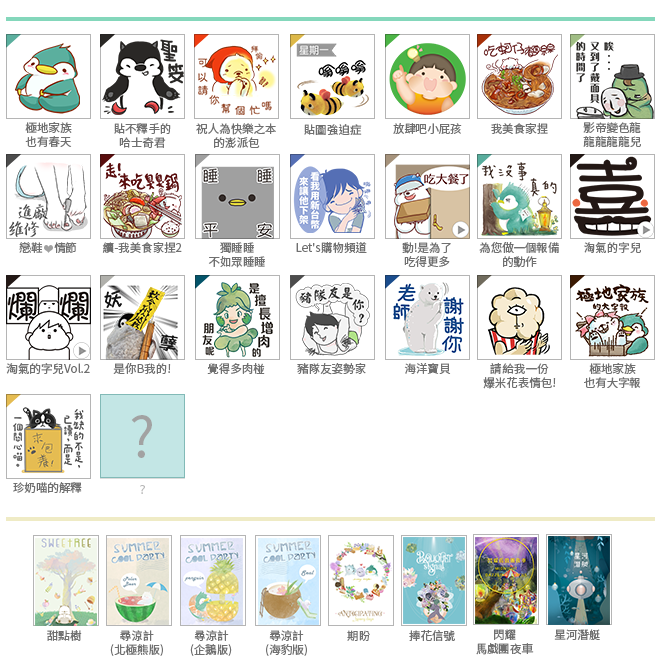
<style>
.page{position:relative;width:660px;height:660px;background:#ffffff}
.page>*{position:absolute;margin:0}
.t1{font:11.5px/14px "SourceHanSansTW-Regular";color:#707070}
.t2{font:11.5px "SourceHanSansTW-Regular";color:#707070}
.t3{font:11.5px "DFKaiShu-SB-Estd-BF";color:#707070}
.t4{font:54.8px "SourceHanSansTW-Regular";letter-spacing:0.05em;color:#a2a2a2}
.t5{font:11.5px "SourceHanSansTW-Regular";color:#b9b9b9}
</style>
<div class="page">
<p class="t1" style="left:25px;top:122px;width:47px;height:25px;text-align:center">極地家族<br>也有春天</p>
<p class="t1" style="left:114px;top:123px;width:57px;height:25px;text-align:center">貼不釋手的<br>哈士奇君</p>
<p class="t1" style="left:196px;top:123px;width:80px;height:25px;text-align:center">祝人為快樂之本<br>的澎派包</p>
<p class="t2" style="left:304px;top:124px;width:58px;height:11px">貼圖強迫症</p>
<p class="t2" style="left:393px;top:123px;width:69px;height:11px">放肆吧小屁孩</p>
<p class="t2" style="left:491px;top:123px;width:57px;height:11px">我美食家捏</p>
<p class="t1" style="left:583px;top:122px;width:58px;height:25px;text-align:center">影帝變色龍<br>龍龍龍龍兒</p>
<p class="t2" style="left:19px;top:242px;width:58px;height:11px">戀鞋<span class="t3">❤</span>情節</p>
<p class="t2" style="left:102px;top:242px;width:80px;height:11px">續-我美食家捏2</p>
<p class="t1" style="left:208px;top:242px;width:57px;height:26px;text-align:center">獨睡睡<br>不如眾睡睡</p>
<p class="t2" style="left:296px;top:242px;width:71px;height:11px">Let's購物頻道</p>
<p class="t1" style="left:402px;top:242px;width:49px;height:25px;text-align:center">動!是為了<br>吃得更多</p>
<p class="t1" style="left:479px;top:242px;width:80px;height:26px;text-align:center">為您做一個報備<br>的動作</p>
<p class="t2" style="left:584px;top:242px;width:57px;height:11px">淘氣的字兒</p>
<p class="t2" style="left:6px;top:363px;width:84px;height:11px">淘氣的字兒Vol.2</p>
<p class="t2" style="left:113px;top:363px;width:58px;height:11px">是你B我的!</p>
<p class="t2" style="left:207px;top:363px;width:58px;height:11px">覺得多肉椪</p>
<p class="t2" style="left:297px;top:363px;width:69px;height:12px">豬隊友姿勢家</p>
<p class="t2" style="left:404px;top:363px;width:47px;height:11px">海洋寶貝</p>
<p class="t1" style="left:483px;top:363px;width:73px;height:26px;text-align:center">請給我一份<br>爆米花表情包!</p>
<p class="t1" style="left:584px;top:363px;width:57px;height:25px;text-align:center">極地家族<br>也有大字報</p>
<p class="t4" style="left:131px;top:415px;width:21px;height:43px">?</p>
<p class="t2" style="left:13px;top:482px;width:69px;height:11px">珍奶喵的解釋</p>
<p class="t5" style="left:140px;top:485px;width:5px;height:9px">?</p>
<p class="t2" style="left:47px;top:630px;width:35px;height:11px">甜點樹</p>
<p class="t1" style="left:110px;top:630px;width:53px;height:26px;text-align:center">尋涼計<br>(北極熊版)</p>
<p class="t1" style="left:190px;top:630px;width:42px;height:26px;text-align:center">尋涼計<br>(企鵝版)</p>
<p class="t1" style="left:266px;top:630px;width:41px;height:26px;text-align:center">尋涼計<br>(海豹版)</p>
<p class="t2" style="left:347px;top:630px;width:23px;height:11px">期盼</p>
<p class="t2" style="left:409px;top:630px;width:46px;height:11px">捧花信號</p>
<p class="t1" style="left:476px;top:629px;width:58px;height:26px;text-align:center">閃耀<br>馬戲團夜車</p>
<p class="t2" style="left:554px;top:629px;width:46px;height:11px">星河潛艇</p>
</div>
